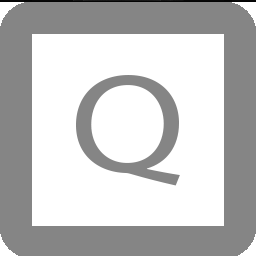
<style>
.page{position:relative;width:256px;height:256px;background:#ffffff}
.page>*{position:absolute;margin:0}
.t1{font:141.7px "MyriadPro-Regular";color:#858585;scale:1.18 1}
</style>
<div class="page">
<p class="t1" style="left:76px;top:73px;width:104px;height:111px">Q</p>
</div>
